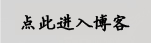
<style>
.page{position:relative;width:151px;height:43px;background:#d6d5d3}
.page>*{position:absolute;margin:0}
.t1{font:18px "FZYBKSJW--GB1-0";color:#000000;font-weight:bold}
</style>
<div class="page">
<p class="t1" style="left:21px;top:14px;width:109px;height:18px">点此进入博客</p>
</div>
